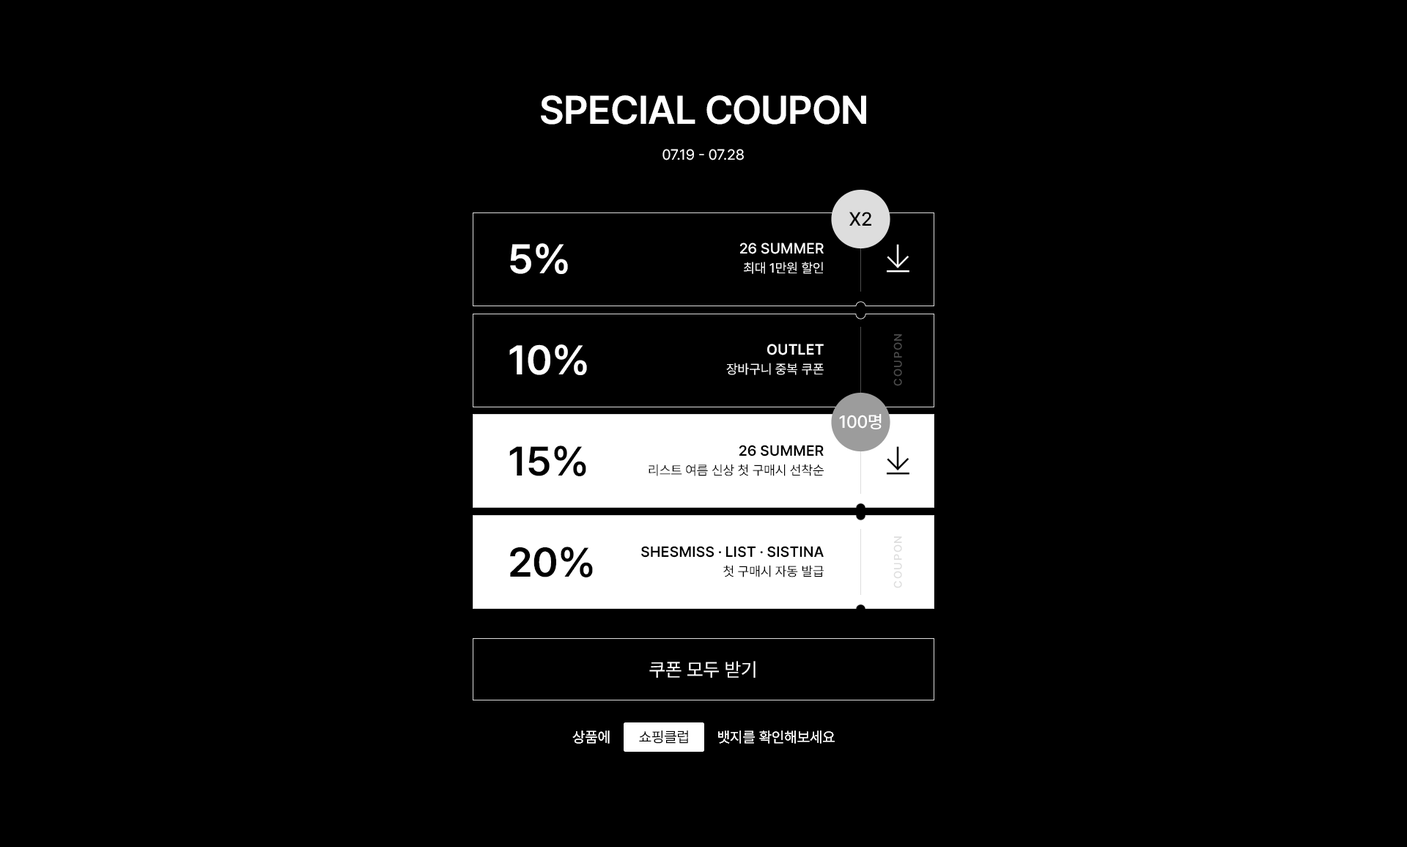
<style>
.page{position:relative;width:1407px;height:847px;background:#000000}
.page>*{position:absolute;margin:0}
.t1{font:39.6px "Pretendard-SemiBold";letter-spacing:-0.01em;color:#ffffff;text-transform:uppercase}
.t2{font:39.6px "Pretendard-SemiBold";letter-spacing:-0.02em;color:#ffffff;text-transform:uppercase}
.t3{font:14.7px "Pretendard-Regular";color:#ffffff;text-transform:uppercase}
.t4{font:19.1px "Pretendard-Medium";color:#000000;text-transform:uppercase}
.t5{font:41px "Pretendard-SemiBold";letter-spacing:-0.01em;color:#ffffff;text-transform:uppercase}
.t6{font:14.7px/20.5px "Pretendard-Medium";color:#ffffff;text-transform:uppercase}
.t7{font:13.2px/20.5px "Pretendard-Regular";color:#ffffff;text-transform:uppercase}
.t8{font:11px "Pretendard-Medium";letter-spacing:0.1em;color:#4b4b4b;text-transform:uppercase}
.t9{font:14.7px/20.5px "Pretendard-SemiBold";color:#ffffff;text-transform:uppercase}
.t10{font:17.6px "Pretendard-Medium";letter-spacing:-0.01em;color:#ffffff;text-transform:uppercase}
.t11{font:41px "Pretendard-SemiBold";letter-spacing:-0.01em;color:#000000;text-transform:uppercase}
.t12{font:13.2px/20.5px "Pretendard-Regular";color:#000000;text-transform:uppercase}
.t13{font:14.7px/20.5px "Pretendard-SemiBold";color:#000000;text-transform:uppercase}
.t14{font:11px "Pretendard-Medium";letter-spacing:0.1em;color:#dddddd;text-transform:uppercase}
.t15{font:19.1px "Pretendard-Regular";color:#ffffff;text-transform:uppercase}
.t16{font:14.7px "Pretendard-Regular";color:#ffffff}
.t17{font:14.7px "Pretendard-Light";color:#000000}
</style>
<div class="page">
<p class="t1" style="left:541px;top:95px;width:325px;height:30px">SPECIAL<span class="t2"> COUPON</span></p>
<p class="t1" style="left:541px;top:95px;width:325px;height:30px">SPECIAL<span class="t2"> COUPON</span></p>
<p class="t3" style="left:663px;top:149px;width:81px;height:12px">07.19 - 07.28</p>
<p class="t3" style="left:663px;top:149px;width:81px;height:12px">07.19 - 07.28</p>
<p class="t4" style="left:850px;top:212px;width:22px;height:14px">x2</p>
<p class="t4" style="left:850px;top:212px;width:22px;height:14px">x2</p>
<p class="t5" style="left:510px;top:243px;width:58px;height:31px">5%</p>
<p class="t5" style="left:510px;top:243px;width:58px;height:31px">5%</p>
<p class="t6" style="left:740px;top:243px;width:84px;height:31px;text-align:right">26 summer<br><span class="t7"> 최대 1만원 할인</span></p>
<p class="t6" style="left:740px;top:243px;width:84px;height:31px;text-align:right">26 summer<br><span class="t7"> 최대 1만원 할인</span></p>
<p class="t8" style="left:893px;top:334px;width:9px;height:52px;rotate:-90deg">coupon</p>
<p class="t8" style="left:893px;top:334px;width:9px;height:52px;rotate:-90deg">coupon</p>
<p class="t5" style="left:509px;top:344px;width:78px;height:31px">10%</p>
<p class="t5" style="left:509px;top:344px;width:78px;height:31px">10%</p>
<p class="t7" style="left:726px;top:344px;width:98px;height:31px;text-align:right"><span class="t9">outlet<br></span>장바구니 중복 쿠폰</p>
<p class="t7" style="left:726px;top:344px;width:98px;height:31px;text-align:right"><span class="t9">outlet<br></span>장바구니 중복 쿠폰</p>
<p class="t10" style="left:839px;top:414px;width:43px;height:16px">100명</p>
<p class="t10" style="left:839px;top:414px;width:43px;height:16px">100명</p>
<p class="t11" style="left:509px;top:446px;width:77px;height:30px">15%</p>
<p class="t11" style="left:509px;top:446px;width:77px;height:30px">15%</p>
<p class="t12" style="left:649px;top:445px;width:175px;height:31px;text-align:right"><span class="t13">26 summer<br></span>리스트 여름 신상 첫 구매시 선착순</p>
<p class="t12" style="left:649px;top:445px;width:175px;height:31px;text-align:right"><span class="t13">26 summer<br></span>리스트 여름 신상 첫 구매시 선착순</p>
<p class="t14" style="left:893px;top:537px;width:9px;height:52px;rotate:-90deg">coupon</p>
<p class="t14" style="left:893px;top:537px;width:9px;height:52px;rotate:-90deg">coupon</p>
<p class="t11" style="left:510px;top:547px;width:83px;height:31px">20%</p>
<p class="t11" style="left:510px;top:547px;width:83px;height:31px">20%</p>
<p class="t13" style="left:641px;top:546px;width:183px;height:32px;text-align:right">shesmiss . list . sistina<br><span class="t12">첫 구매시 자동 발급</span></p>
<p class="t13" style="left:641px;top:546px;width:183px;height:32px;text-align:right">shesmiss . list . sistina<br><span class="t12">첫 구매시 자동 발급</span></p>
<p class="t15" style="left:649px;top:661px;width:107px;height:17px">쿠폰 모두 받기</p>
<p class="t15" style="left:650px;top:661px;width:106px;height:17px">쿠폰 모두 받기</p>
<p class="t16" style="left:572px;top:731px;width:263px;height:13px">상품에                             뱃지를 확인해보세요</p>
<p class="t16" style="left:572px;top:731px;width:263px;height:13px">상품에                             뱃지를 확인해보세요</p>
<p class="t16" style="left:572px;top:731px;width:263px;height:13px">상품에                             뱃지를 확인해보세요</p>
<p class="t16" style="left:572px;top:731px;width:263px;height:13px">상품에                             뱃지를 확인해보세요</p>
<p class="t17" style="left:639px;top:731px;width:49px;height:13px">쇼핑클럽</p>
<p class="t17" style="left:639px;top:731px;width:49px;height:13px">쇼핑클럽</p>
<p class="t17" style="left:639px;top:731px;width:49px;height:13px">쇼핑클럽</p>
<p class="t17" style="left:639px;top:731px;width:49px;height:13px">쇼핑클럽</p>
</div>
